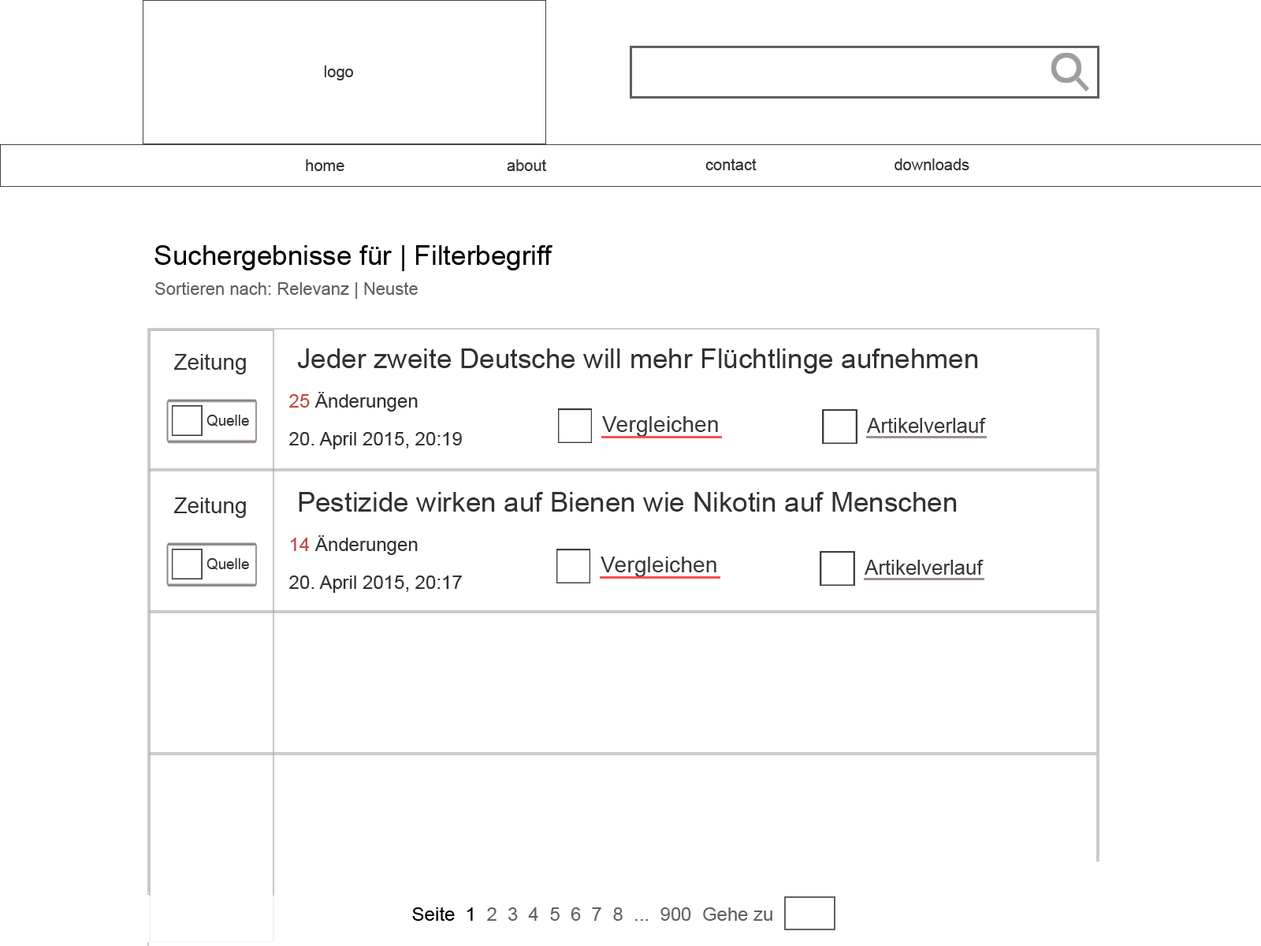
<style>
.page{position:relative;width:1261px;height:946px;background:#ffffff}
.page>*{position:absolute;margin:0}
.t1{font:15.8px "ArialMT";color:#343434}
.t2{font:27.6px "ArialMT";color:#000000}
.t3{font:17.3px "ArialMT";color:#616161}
.t4{font:22.1px "ArialMT";color:#323232}
.t5{font:27.6px "ArialMT";color:#323232}
.t6{font:18.9px "ArialMT";color:#323232}
.t7{font:18.9px "ArialMT";color:#c24444}
.t8{font:14.8px "ArialMT";color:#383838}
.t9{font:22.4px "ArialMT";color:#383838}
.t10{font:20.4px "ArialMT";color:#383838}
.t11{font:18.9px "ArialMT";color:#616161}
.t12{font:18.9px "ArialMT";color:#000000}
</style>
<div class="page">
<p class="t1" style="left:324px;top:65px;width:29px;height:15px">logo</p>
<p class="t1" style="left:306px;top:159px;width:38px;height:12px">home</p>
<p class="t1" style="left:507px;top:159px;width:39px;height:12px">about</p>
<p class="t1" style="left:705px;top:158px;width:52px;height:12px">contact</p>
<p class="t1" style="left:894px;top:158px;width:75px;height:12px">downloads</p>
<p class="t2" style="left:154px;top:245px;width:398px;height:26px">Suchergebnisse für | Filterbegriff</p>
<p class="t3" style="left:154px;top:282px;width:264px;height:17px">Sortieren nach: Relevanz | Neuste</p>
<p class="t4" style="left:174px;top:354px;width:72px;height:20px">Zeitung</p>
<p class="t5" style="left:297px;top:348px;width:681px;height:26px">Jeder zweite Deutsche will mehr Flüchtlinge aufnehmen</p>
<p class="t6" style="left:289px;top:392px;width:129px;height:19px"><span class="t7">25 </span>Änderungen</p>
<p class="t8" style="left:206px;top:415px;width:43px;height:11px">Quelle</p>
<p class="t9" style="left:602px;top:416px;width:116px;height:21px">Vergleichen</p>
<p class="t10" style="left:867px;top:418px;width:119px;height:15px">Artikelverlauf</p>
<p class="t6" style="left:289px;top:432px;width:173px;height:17px">20. April 2015, 20:19</p>
<p class="t4" style="left:174px;top:497px;width:72px;height:21px">Zeitung</p>
<p class="t5" style="left:299px;top:492px;width:658px;height:19px">Pestizide wirken auf Bienen wie Nikotin auf Menschen</p>
<p class="t6" style="left:291px;top:535px;width:127px;height:20px"><span class="t7">14 </span>Änderungen</p>
<p class="t8" style="left:206px;top:558px;width:43px;height:12px">Quelle</p>
<p class="t9" style="left:601px;top:556px;width:115px;height:21px">Vergleichen</p>
<p class="t10" style="left:865px;top:560px;width:119px;height:15px">Artikelverlauf</p>
<p class="t6" style="left:289px;top:575px;width:173px;height:18px">20. April 2015, 20:17</p>
<p class="t11" style="left:412px;top:906px;width:360px;height:14px"><span class="t12">Seite  1 </span> 2  3  4  5  6  7  8  ...  900  Gehe zu</p>
</div>
